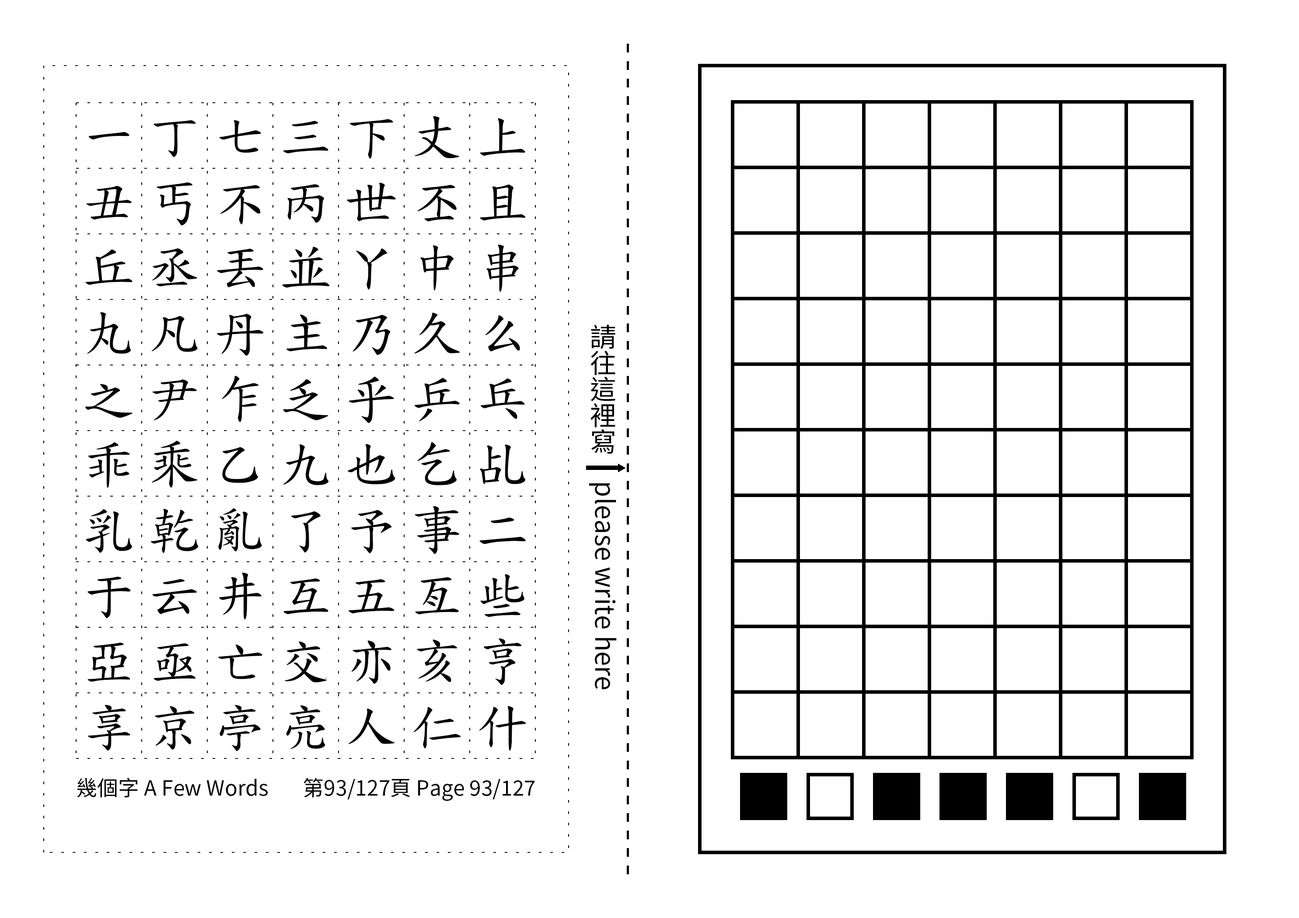
<style>
.page{position:relative;width:1299px;height:918px;background:#ffffff}
.page>*{position:absolute;margin:0}
.t1{font:52.5px/65.6px "TW-Kai-98_1";letter-spacing:0.25em;color:#000000}
.t2{font:26.2px "SourceHanSansTC-Regular";color:#000000}
.t3{font:21px "SourceHanSansTC-Regular";color:#000000}
</style>
<div class="page">
<p class="t1" style="left:85px;top:116px;width:441px;height:636px;text-align:center">一丁七三下丈上丑丐不丙世丕且丘丞丟並丫中串丸凡丹主乃久么之尹乍乏乎乒乓乖乘乙九也乞乩乳乾亂了予事二于云井互五亙些亞亟亡交亦亥亨享京亭亮人仁什</p>
<p class="t2" style="left:589px;top:324px;width:28px;height:366px;text-align:center">請往這裡寫　please write here</p>
<p class="t3" style="left:77px;top:778px;width:191px;height:20px">幾個字 A Few Words</p>
<p class="t3" style="left:303px;top:778px;width:232px;height:23px">第93/127頁 Page 93/127</p>
</div>
